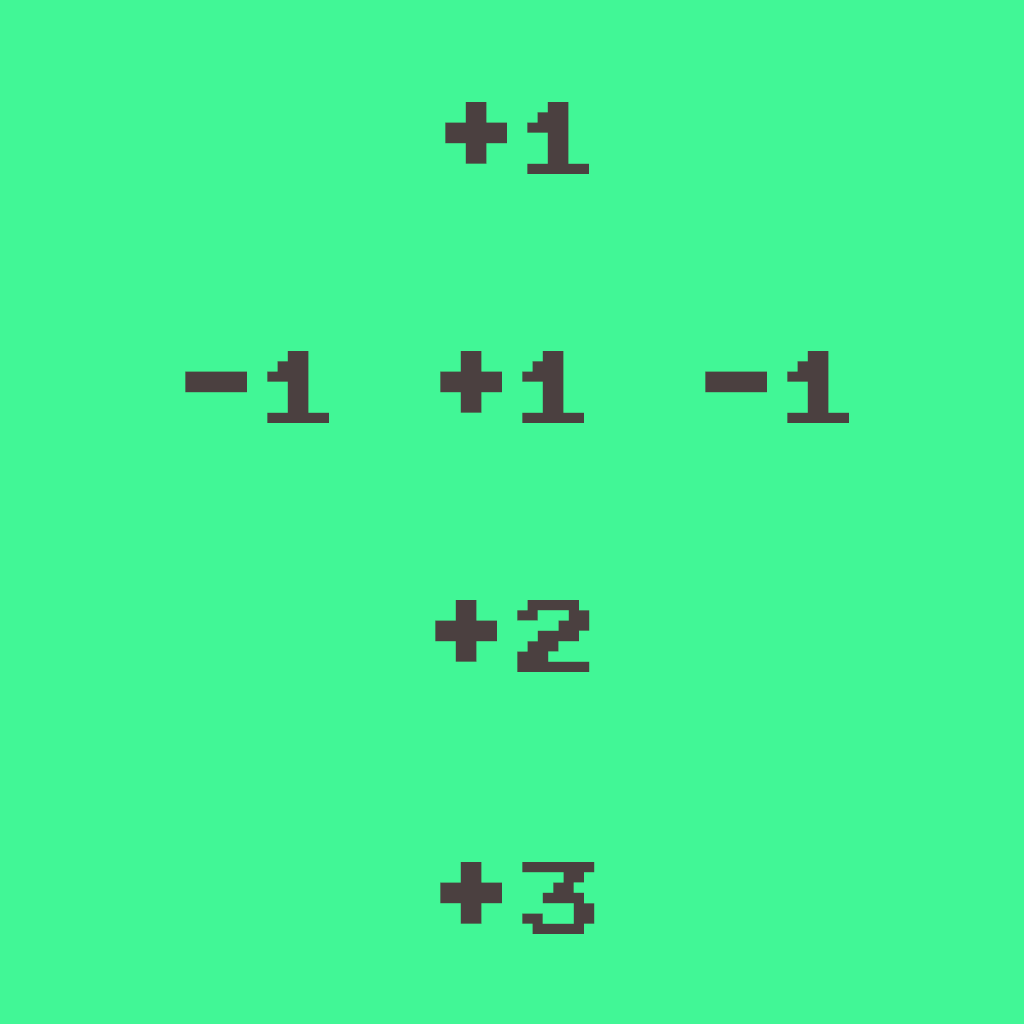
<style>
.page{position:relative;width:1024px;height:1024px;background:#41f796}
.page>*{position:absolute;margin:0}
.t1{font:72px "Ice-Hockey";color:#4b4040}
</style>
<div class="page">
<p class="t1" style="left:445px;top:102px;width:144px;height:72px">+1</p>
<p class="t1" style="left:185px;top:351px;width:144px;height:72px">-1</p>
<p class="t1" style="left:440px;top:351px;width:144px;height:72px">+1</p>
<p class="t1" style="left:705px;top:351px;width:144px;height:72px">-1</p>
<p class="t1" style="left:435px;top:600px;width:155px;height:72px">+2</p>
<p class="t1" style="left:440px;top:862px;width:155px;height:72px">+3</p>
</div>
